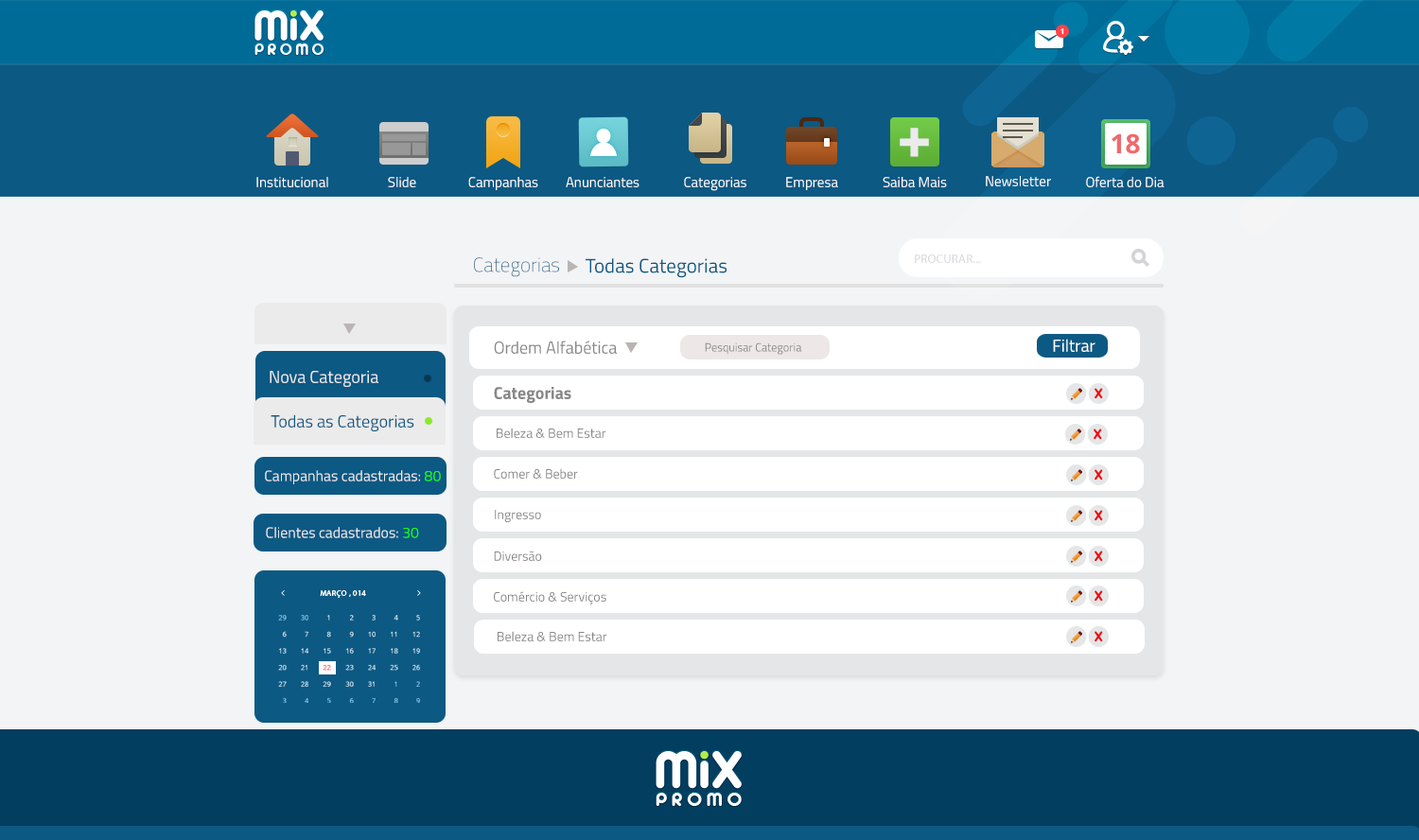
<style>
.page{position:relative;width:1419px;height:840px;background:#f3f4f5}
.page>*{position:absolute;margin:0}
.t1{font:7.6px "OpenSans-Bold";color:#ffffff}
.t2{font:62.7px "TitilliumWeb-Bold";color:#ebebeb}
.t3{font:26.5px "OpenSans-Bold";color:#f0686b;text-transform:uppercase}
.t4{font:14.2px "TitilliumWeb-Regular";color:#ffffff}
.t5{font:19.9px "TitilliumWeb-Thin";color:#0c5983}
.t6{font:12.3px "MyriadPro-Regular";letter-spacing:0.013em;color:#d2d4d8;text-transform:uppercase}
.t7{font:19.9px "TitilliumWeb-Regular";color:#0c5983}
.t8{font:17.2px "TitilliumWeb-Regular";color:#878787}
.t9{font:17.2px "TitilliumWeb-Regular";color:#ffffff}
.t10{font:11.7px "TitilliumWeb-Regular";color:#878787}
.t11{font:17.2px "TitilliumWeb-Regular";color:#ebebeb}
.t12{font:17.2px "TitilliumWeb-Bold";color:#878787}
.t13{font:20.8px "QuicksandBold-Regular";letter-spacing:-0.025em;color:#f00606}
.t14{font:17.2px "TitilliumWeb-Regular";color:#0c5983}
.t15{font:13.2px "TitilliumWeb-Regular";color:#878787}
.t16{font:14.9px "TitilliumWeb-Regular";color:#ebebeb}
.t17{font:14.9px "TitilliumWeb-Regular";color:#1bff03}
.t18{font:7.8px "MyriadPro-Regular";letter-spacing:0.051em;color:#ffffff;text-transform:uppercase}
.t19{font:6.6px/16.6px "OpenSans";text-transform:uppercase}
</style>
<div class="page">
<p class="t1" style="left:1061px;top:28px;width:3px;height:7px">1</p>
<p class="t2" style="left:900px;top:128px;width:29px;height:29px">+</p>
<p class="t3" style="left:1112px;top:133px;width:28px;height:21px">18</p>
<p class="t4" style="left:256px;top:177px;width:72px;height:10px">Institucional</p>
<p class="t4" style="left:388px;top:177px;width:28px;height:10px">Slide</p>
<p class="t4" style="left:468px;top:177px;width:70px;height:13px">Campanhas</p>
<p class="t4" style="left:566px;top:177px;width:74px;height:10px">Anunciantes</p>
<p class="t4" style="left:684px;top:177px;width:63px;height:14px">Categorias</p>
<p class="t4" style="left:786px;top:177px;width:52px;height:13px">Empresa</p>
<p class="t4" style="left:883px;top:177px;width:64px;height:10px">Saiba Mais</p>
<p class="t4" style="left:986px;top:176px;width:65px;height:10px">Newsletter</p>
<p class="t4" style="left:1086px;top:176px;width:79px;height:11px">Oferta do Dia</p>
<p class="t5" style="left:474px;top:257px;width:85px;height:20px">Categorias</p>
<p class="t6" style="left:915px;top:255px;width:66px;height:8px">PROCURAR...</p>
<p class="t7" style="left:586px;top:258px;width:141px;height:20px">Todas Categorias</p>
<p class="t8" style="left:494px;top:341px;width:123px;height:13px">Ordem Alfabética</p>
<p class="t9" style="left:1053px;top:339px;width:43px;height:13px">Filtrar</p>
<p class="t10" style="left:705px;top:343px;width:97px;height:12px">Pesquisar Categoria</p>
<p class="t11" style="left:270px;top:371px;width:108px;height:16px">Nova Categoria</p>
<p class="t12" style="left:494px;top:387px;width:77px;height:16px">Categorias</p>
<p class="t13" style="left:1095px;top:388px;width:8px;height:11px">x</p>
<p class="t14" style="left:271px;top:414px;width:143px;height:17px">Todas as Categorias</p>
<p class="t15" style="left:497px;top:428px;width:109px;height:10px">Beleza &amp; Bem Estar</p>
<p class="t13" style="left:1094px;top:429px;width:8px;height:11px">x</p>
<p class="t16" style="left:265px;top:470px;width:176px;height:14px">Campanhas cadastradas: <span class="t17">80</span></p>
<p class="t15" style="left:494px;top:468px;width:84px;height:11px">Comer &amp; Beber</p>
<p class="t13" style="left:1095px;top:469px;width:8px;height:12px">x</p>
<p class="t15" style="left:495px;top:510px;width:46px;height:12px">Ingresso</p>
<p class="t13" style="left:1095px;top:510px;width:8px;height:11px">x</p>
<p class="t16" style="left:266px;top:527px;width:153px;height:11px">Clientes cadastrados: <span class="t17">30</span></p>
<p class="t15" style="left:494px;top:551px;width:48px;height:10px">Diversão</p>
<p class="t13" style="left:1095px;top:551px;width:8px;height:11px">x</p>
<p class="t18" style="left:320px;top:590px;width:46px;height:8px">MARÇO , 014</p>
<p class="t15" style="left:494px;top:591px;width:112px;height:14px">Comércio &amp; Serviços</p>
<p class="t13" style="left:1095px;top:590px;width:8px;height:12px">x</p>
<p class="t19" style="left:278px;top:615px;width:9px;height:88px;text-align:right">29<br>6<br>13<br>20<br>27<br>3</p>
<p class="t19" style="left:301px;top:615px;width:7px;height:88px;text-align:right">30<br>7<br>14<br>21<br>28<br>4</p>
<p class="t19" style="left:323px;top:615px;width:8px;height:88px;text-align:right">1<br>8<br>15<br>22<br>29<br>5</p>
<p class="t19" style="left:345px;top:615px;width:9px;height:88px;text-align:right">2<br>9<br>16<br>23<br>30<br>6</p>
<p class="t19" style="left:368px;top:615px;width:8px;height:88px;text-align:right">3<br>10<br>17<br>24<br>31<br>7</p>
<p class="t19" style="left:390px;top:615px;width:8px;height:88px;text-align:right">4<br>11<br>18<br>25<br>1<br>8</p>
<p class="t19" style="left:413px;top:615px;width:7px;height:88px;text-align:right">5<br>12<br>19<br>26<br>2<br>9</p>
<p class="t15" style="left:498px;top:631px;width:109px;height:10px">Beleza &amp; Bem Estar</p>
<p class="t13" style="left:1095px;top:631px;width:8px;height:11px">x</p>
</div>
